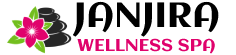
<style>
.page{position:relative;width:236px;height:55px;background:#ffffff}
.page>*{position:absolute;margin:0}
.t1{font:35px "Aclonica-Regular";color:#000000}
.t2{font:17px "Aclonica-Regular";color:#e0026c}
</style>
<div class="page">
<p class="t1" style="left:72px;top:1px;width:147px;height:36px">JANJIRA</p>
<p class="t2" style="left:77px;top:38px;width:138px;height:16px">WELLNESS SPA</p>
</div>
